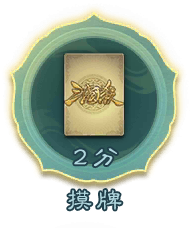
<style>
.page{position:relative;width:190px;height:238px;background:#ffffff}
.page>*{position:absolute;margin:0}
.t1{font:26.7px "FZLBJW--GB1-0";letter-spacing:0.12em;color:#b1d8df}
</style>
<div class="page">
<p class="t1" style="left:74px;top:149px;width:13px;height:16px">2</p>
<p class="t1" style="left:94px;top:148px;width:23px;height:19px">分</p>
<p class="t1" style="left:68px;top:190px;width:54px;height:20px">摸牌</p>
</div>
